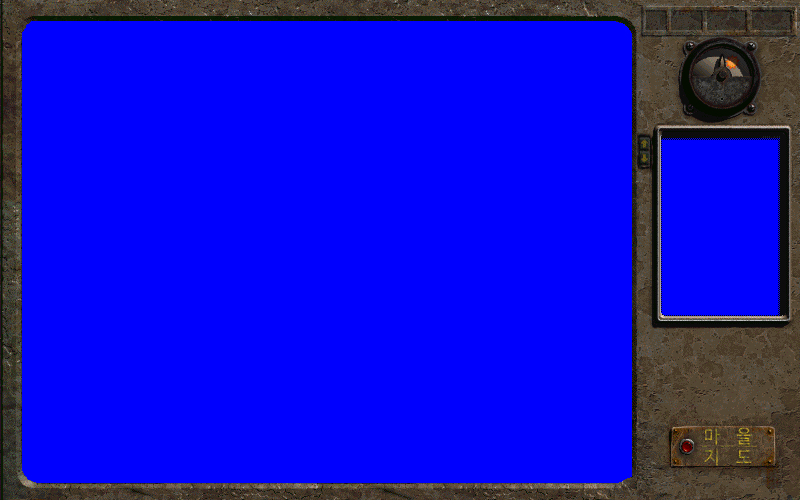
<style>
.page{position:relative;width:800px;height:500px;background:#0000ff}
.page>*{position:absolute;margin:0}
.t1{font:18px/21px "NanumBarunGothic"}
</style>
<div class="page">
<p class="t1" style="left:704px;top:427px;width:48px;height:39px;text-align:center">마    을<br>지    도</p>
</div>
